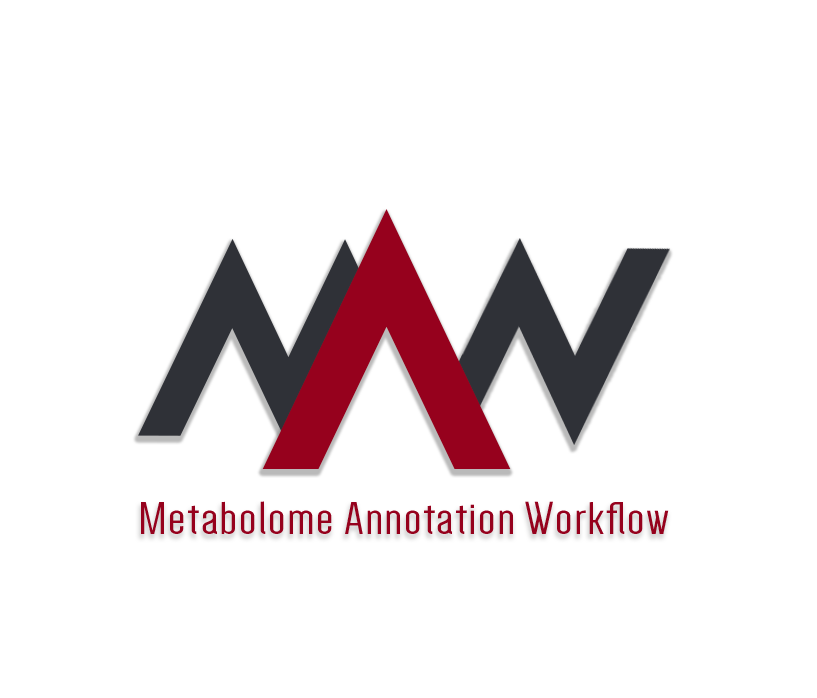
<style>
.page{position:relative;width:817px;height:698px;background:#ffffff}
.page>*{position:absolute;margin:0}
.t1{font:396px "GameOfSquids";letter-spacing:0.2em;color:#96011d}
.t2{font:47.7px "Dense-Regular";letter-spacing:0.025em;color:#96011d;scale:1.26 1}
</style>
<div class="page">
<p class="t1" style="left:262px;top:209px;width:249px;height:260px">A</p>
<p class="t2" style="left:141px;top:501px;width:528px;height:33px">Metabolome Annotation Workflow</p>
</div>
